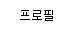
<style>
.page{position:relative;width:70px;height:30px;background:#ffffff}
.page>*{position:absolute;margin:0}
.t1{font:12px "GulimChe";color:#000000;font-variant:small-caps}
</style>
<div class="page">
<p class="t1" style="left:20px;top:10px;width:33px;height:11px">프로필</p>
</div>
